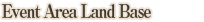
<style>
.page{position:relative;width:204px;height:22px;background:#ffffff}
.page>*{position:absolute;margin:0}
.t1{font:18px "RyuminPro-ExBold";letter-spacing:-0.08em;color:#534738;scale:0.9 1}
</style>
<div class="page">
<p class="t1" style="left:2px;top:4px;width:149px;height:15px">Event Area Land Base</p>
</div>
